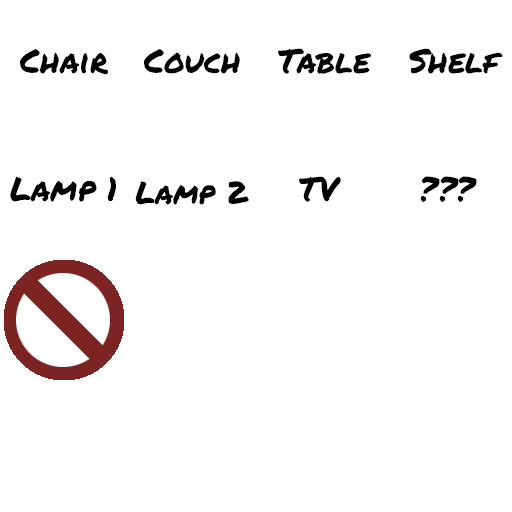
<style>
.page{position:relative;width:512px;height:512px;background:#ffffff}
.page>*{position:absolute;margin:0}
.t1{font:33.3px "PermanentMarker-Regular";color:#000000}
.t2{font:31.2px "PermanentMarker-Regular";color:#000000}
</style>
<div class="page">
<p class="t1" style="left:20px;top:49px;width:89px;height:26px">Chair</p>
<p class="t1" style="left:144px;top:49px;width:96px;height:25px">Couch</p>
<p class="t1" style="left:278px;top:48px;width:94px;height:26px">Table</p>
<p class="t1" style="left:409px;top:48px;width:94px;height:26px">Shelf</p>
<p class="t1" style="left:10px;top:176px;width:106px;height:26px">Lamp 1</p>
<p class="t2" style="left:135px;top:181px;width:114px;height:24px">Lamp 2</p>
<p class="t1" style="left:299px;top:176px;width:42px;height:26px">TV</p>
<p class="t1" style="left:420px;top:176px;width:57px;height:26px">???</p>
</div>
